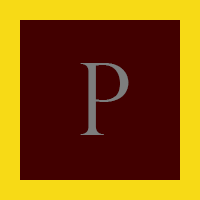
<style>
.page{position:relative;width:200px;height:200px;background:#420000}
.page>*{position:absolute;margin:0}
.t1{font:100px "PerpetuaTitlingMT-Light";color:#7d7d7d}
</style>
<div class="page">
<p class="t1" style="left:80px;top:63px;width:49px;height:72px">P</p>
</div>
